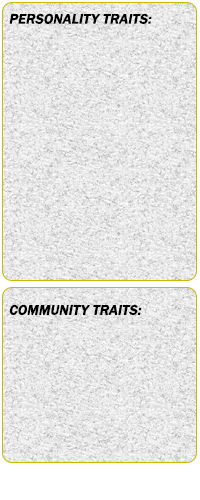
<style>
.page{position:relative;width:200px;height:500px}
.page>*{position:absolute;margin:0}
.t1{font:14px "FranklinGothic-Medium";color:#000000;font-weight:bold;font-style:italic}
</style>
<div class="page">
<p class="t1" style="left:9px;top:13px;width:143px;height:11px">PERSONALITY TRAITS:</p>
<p class="t1" style="left:9px;top:304px;width:133px;height:11px">COMMUNITY TRAITS:</p>
</div>
